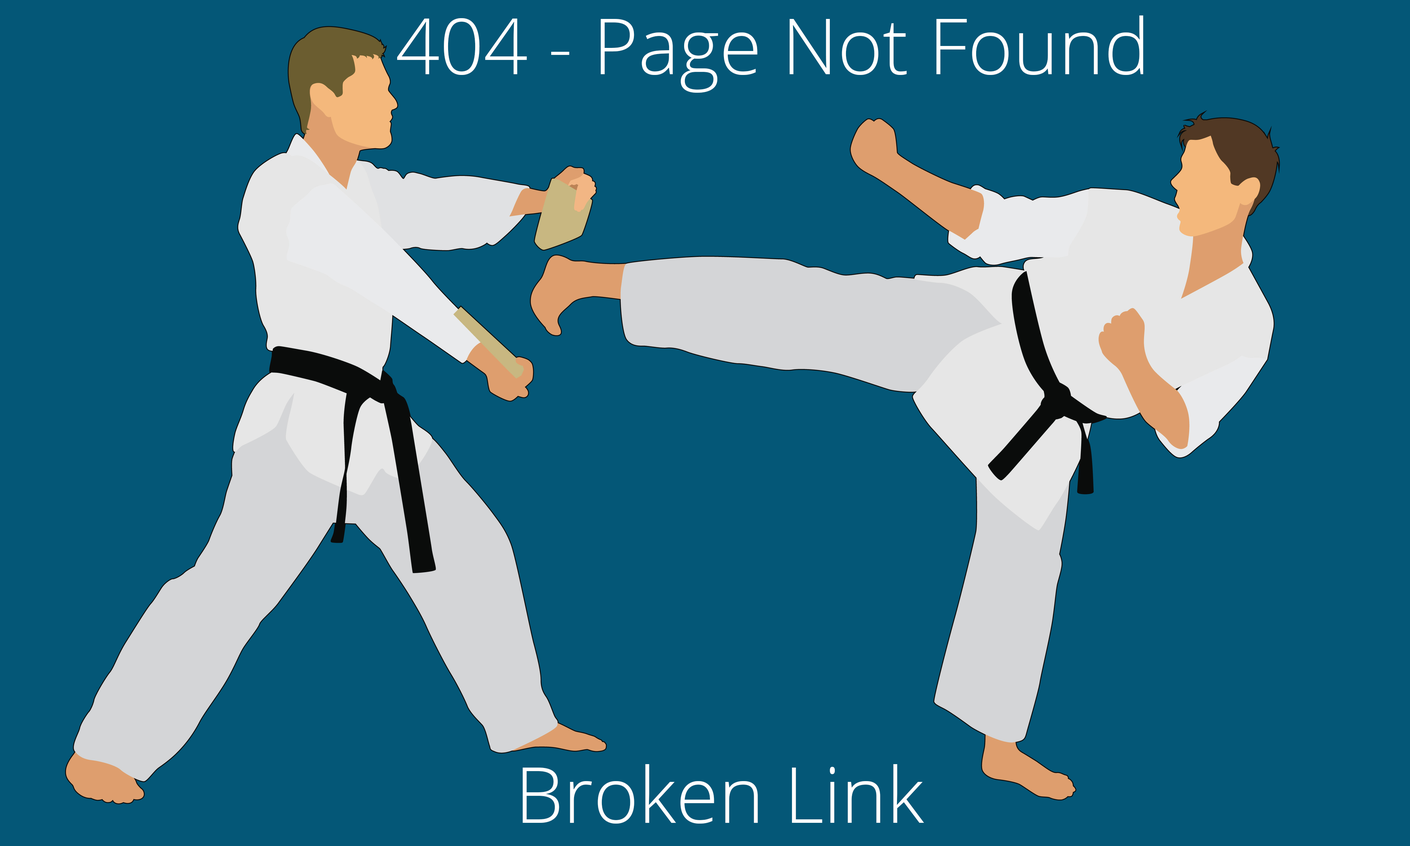
<style>
.page{position:relative;width:1410px;height:846px;background:#045777}
.page>*{position:absolute;margin:0}
.t1{font:77.2px "OpenSans-Light";color:#ffffff}
</style>
<div class="page">
<p class="t1" style="left:397px;top:15px;width:746px;height:78px">404 - Page Not Found</p>
<p class="t1" style="left:523px;top:764px;width:401px;height:59px">Broken Link</p>
</div>
